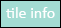
<style>
.page{position:relative;width:61px;height:28px;background:#a3dcd3}
.page>*{position:absolute;margin:0}
.t1{font:16px "Calibri";color:#ffffff}
</style>
<div class="page">
<p class="t1" style="left:6px;top:7px;width:49px;height:11px">tile info</p>
</div>
